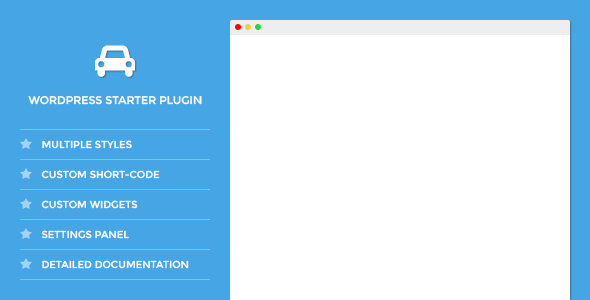
<style>
.page{position:relative;width:590px;height:300px;background:#ffffff}
.page>*{position:absolute;margin:0}
.t1{font:11px "Montserrat-Regular";color:#ffffff;text-transform:uppercase}
.t2{font:10px/30px "Montserrat-Regular";color:#ffffff;text-transform:uppercase}
</style>
<div class="page">
<p class="t1" style="left:28px;top:96px;width:174px;height:9px">WordPress starter plugin</p>
<p class="t2" style="left:41px;top:140px;width:148px;height:129px">multiple styles<br>custom short-code<br>custom widgets<br>settings panel<br>detailed documentation</p>
</div>
